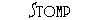
<style>
.page{position:relative;width:100px;height:20px;background:#ffffff}
.page>*{position:absolute;margin:0}
.t1{font:19.3px "BabesInToylandNF";color:#010101}
</style>
<div class="page">
<p class="t1" style="left:29px;top:2px;width:41px;height:16px">Stomp</p>
</div>
